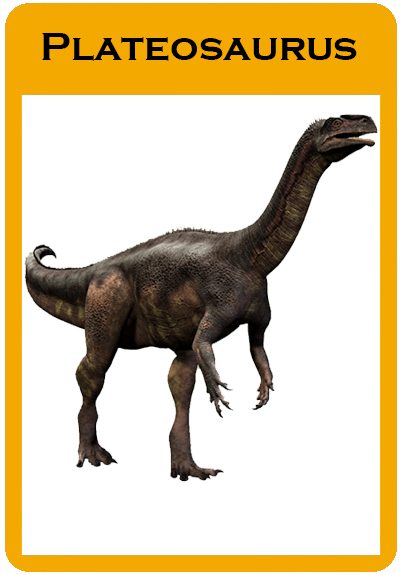
<style>
.page{position:relative;width:400px;height:575px;background:#ffffff}
.page>*{position:absolute;margin:0}
.t1{font:40px "CopperplateGothic-Bold";color:#000000}
</style>
<div class="page">
<p class="t1" style="left:42px;top:33px;width:315px;height:28px">Plateosaurus</p>
</div>
